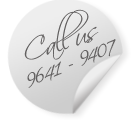
<style>
.page{position:relative;width:135px;height:125px;background:#ffffff}
.page>*{position:absolute;margin:0}
.t1{font:27.9px "ScriptinaPro";color:#636161}
.t2{font:21.4px "ScriptinaPro";color:#636161}
</style>
<div class="page">
<p class="t1" style="left:24px;top:9px;width:75px;height:51px;rotate:-18deg">Call us</p>
<p class="t2" style="left:27px;top:39px;width:89px;height:49px;rotate:-22deg">9641 - 9407</p>
</div>
